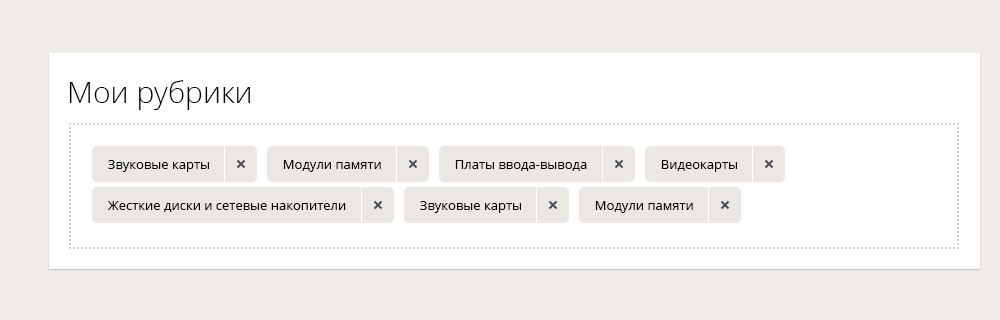
<style>
.page{position:relative;width:1000px;height:320px;background:#ffffff}
.page>*{position:absolute;margin:0}
.t1{font:30px "OpenSans-Light";color:#000000}
.t2{font:13px "OpenSans";color:#000000}
</style>
<div class="page">
<p class="t1" style="left:69px;top:80px;width:181px;height:30px">Мои рубрики</p>
<p class="t2" style="left:108px;top:160px;width:101px;height:12px">Звуковые карты</p>
<p class="t2" style="left:283px;top:160px;width:98px;height:12px">Модули памяти</p>
<p class="t2" style="left:455px;top:160px;width:132px;height:11px">Платы ввода-вывода</p>
<p class="t2" style="left:661px;top:160px;width:76px;height:12px">Видеокарты</p>
<p class="t2" style="left:107px;top:201px;width:239px;height:11px">Жесткие диски и сетевые накопители</p>
<p class="t2" style="left:420px;top:201px;width:101px;height:12px">Звуковые карты</p>
<p class="t2" style="left:595px;top:201px;width:98px;height:12px">Модули памяти</p>
</div>
